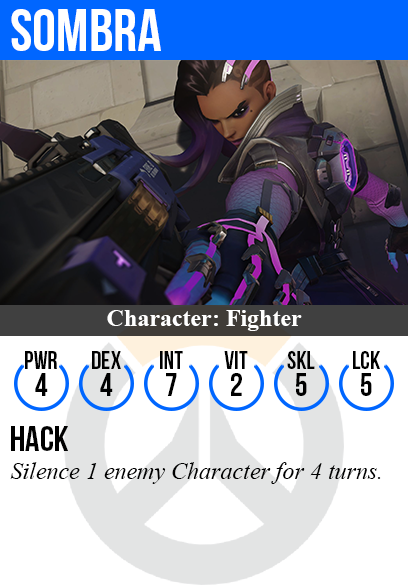
<style>
.page{position:relative;width:408px;height:585px;background:#ffffff}
.page>*{position:absolute;margin:0}
.t1{font:60px "BebasNeue";color:#ffffff}
.t2{font:24px "TimesNewRomanPS-BoldMT";color:#ffffff}
.t3{font:25px "BebasNeue";color:#000000}
.t4{font:32px "BebasNeue";color:#000000}
.t5{font:36px "BebasNeue";color:#000000}
.t6{font:24px "TimesNewRomanPS-ItalicMT";color:#000000}
</style>
<div class="page">
<p class="t1" style="left:11px;top:9px;width:150px;height:42px">sombra</p>
<p class="t2" style="left:107px;top:310px;width:195px;height:21px">Character: Fighter</p>
<p class="t3" style="left:25px;top:351px;width:32px;height:18px">PWR</p>
<p class="t3" style="left:92px;top:351px;width:29px;height:18px">dex</p>
<p class="t3" style="left:160px;top:351px;width:23px;height:18px">int</p>
<p class="t3" style="left:224px;top:351px;width:24px;height:18px">vit</p>
<p class="t3" style="left:287px;top:351px;width:28px;height:18px">skl</p>
<p class="t3" style="left:353px;top:351px;width:27px;height:18px">lck</p>
<p class="t4" style="left:35px;top:373px;width:13px;height:23px">4</p>
<p class="t4" style="left:100px;top:373px;width:13px;height:23px">4</p>
<p class="t4" style="left:166px;top:373px;width:11px;height:23px">7</p>
<p class="t4" style="left:231px;top:373px;width:11px;height:23px">2</p>
<p class="t4" style="left:296px;top:373px;width:11px;height:23px">5</p>
<p class="t4" style="left:361px;top:373px;width:11px;height:23px">5</p>
<p class="t5" style="left:11px;top:426px;width:57px;height:25px">hack</p>
<p class="t6" style="left:10px;top:462px;width:371px;height:22px">Silence 1 enemy Character for 4 turns.</p>
</div>
